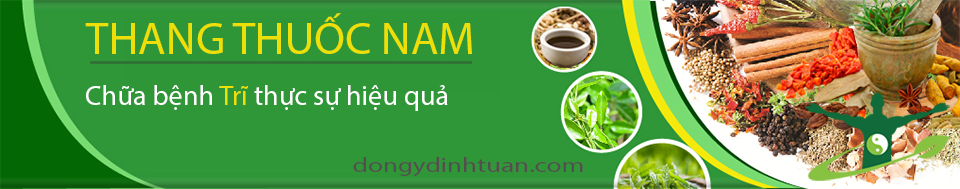
<style>
.page{position:relative;width:960px;height:189px;background:#2f9738}
.page>*{position:absolute;margin:0}
.t1{font:45.4px "MyriadPro-Regular";color:#eddf07}
.t2{font:28.3px "MyriadPro-Regular";color:#ffffff}
.t3{font:28.3px "MyriadPro-Regular";color:#eddf07}
.t4{font:20px "MyriadPro-Regular";color:#544f4f;scale:1.35 1}
</style>
<div class="page">
<p class="t1" style="left:85px;top:13px;width:387px;height:41px">THANG THUỐC NAM</p>
<p class="t2" style="left:86px;top:85px;width:362px;height:26px">Chữa bệnh <span class="t3">Trĩ</span> thực sự hiệu quả</p>
<p class="t4" style="left:353px;top:157px;width:230px;height:19px">dongydinhtuan.com</p>
</div>
